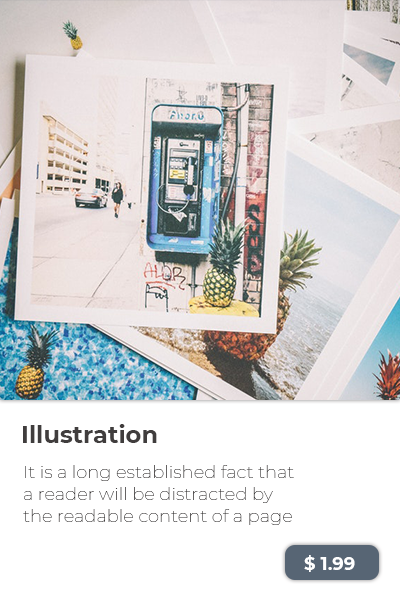
<style>
.page{position:relative;width:400px;height:600px;background:#ffffff}
.page>*{position:absolute;margin:0}
.t1{font:24px "Montserrat-Bold";color:#403d3d}
.t2{font:18px "Montserrat-Thin";color:#403d3d}
.t3{font:18px "Montserrat-Bold";color:#ffffff}
</style>
<div class="page">
<p class="t1" style="left:23px;top:424px;width:134px;height:19px">Illustration</p>
<p class="t2" style="left:23px;top:465px;width:271px;height:60px">It is a long established fact that a reader will be distracted by the readable content of a page</p>
<p class="t3" style="left:304px;top:555px;width:51px;height:17px">$ 1.99</p>
</div>
